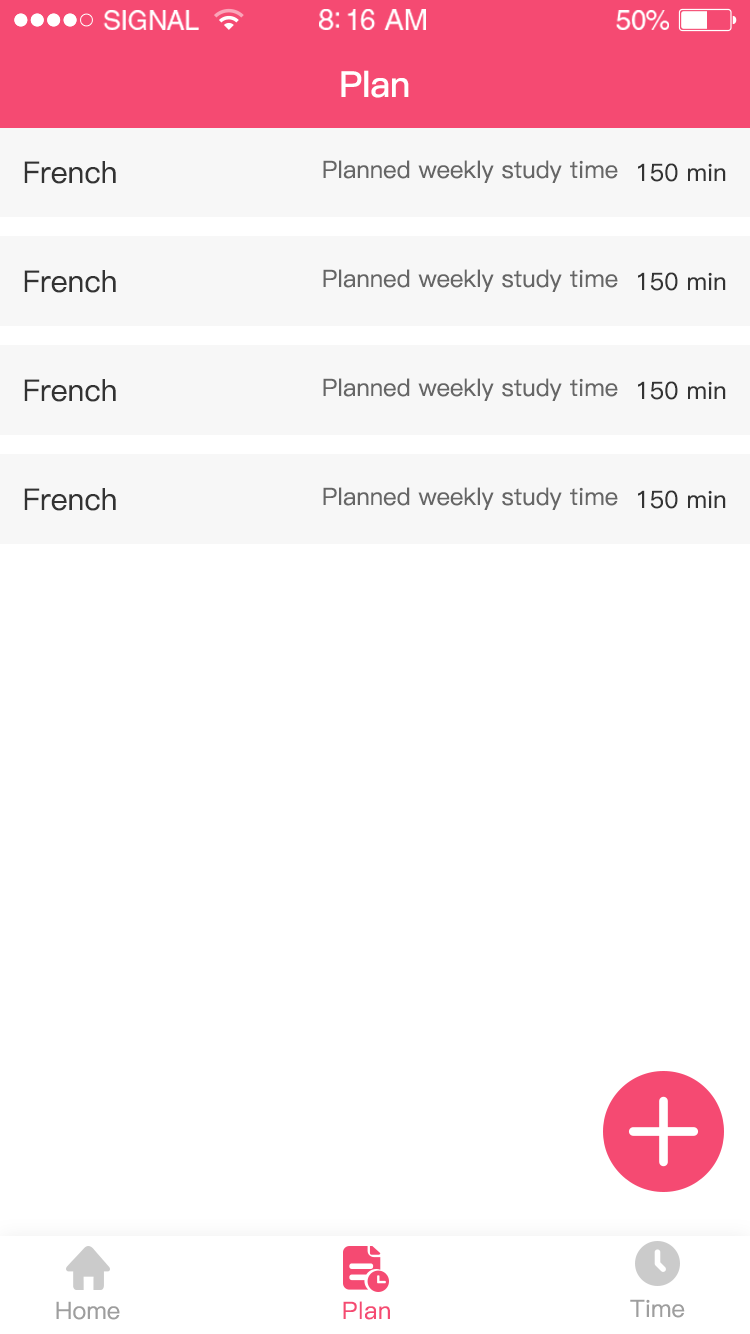
<style>
.page{position:relative;width:750px;height:1334px;background:#ffffff}
.page>*{position:absolute;margin:0}
.t1{font:26.9px "HelveticaLTStd-Roman";letter-spacing:-0.02em;color:#ffffff}
.t2{font:29.3px "HelveticaLTStd-Roman";letter-spacing:-0.02em;color:#ffffff}
.t3{font:28.1px "HelveticaLTStd-Roman";letter-spacing:-0.02em;color:#ffffff}
.t4{font:36px "PingFang-SC-Bold";letter-spacing:-0.02em;color:#ffffff}
.t5{font:30px "PingFang-SC-Medium";color:#333333}
.t6{font:24px "PingFang-SC-Medium";color:#666666}
.t7{font:24px "PingFang-SC-Medium";color:#333333}
.t8{font:24px "PingFang-SC-Medium";color:#9e9e9e}
.t9{font:24px "PingFang-SC-Medium";letter-spacing:0.02em;color:#f54a72}
</style>
<div class="page">
<p class="t1" style="left:103px;top:10px;width:96px;height:20px">SIGNAL</p>
<p class="t2" style="left:319px;top:9px;width:107px;height:21px">8:16 AM</p>
<p class="t3" style="left:616px;top:10px;width:53px;height:20px">50%</p>
<p class="t4" style="left:341px;top:70px;width:68px;height:28px">Plan</p>
<p class="t5" style="left:24px;top:161px;width:92px;height:23px">French</p>
<p class="t6" style="left:323px;top:160px;width:295px;height:23px">Planned weekly study time</p>
<p class="t7" style="left:638px;top:163px;width:88px;height:19px">150 min</p>
<p class="t5" style="left:24px;top:270px;width:92px;height:23px">French</p>
<p class="t6" style="left:323px;top:269px;width:295px;height:23px">Planned weekly study time</p>
<p class="t7" style="left:638px;top:272px;width:88px;height:19px">150 min</p>
<p class="t5" style="left:24px;top:379px;width:92px;height:23px">French</p>
<p class="t6" style="left:323px;top:378px;width:295px;height:23px">Planned weekly study time</p>
<p class="t7" style="left:638px;top:381px;width:88px;height:19px">150 min</p>
<p class="t5" style="left:24px;top:488px;width:92px;height:23px">French</p>
<p class="t6" style="left:323px;top:487px;width:295px;height:23px">Planned weekly study time</p>
<p class="t7" style="left:638px;top:490px;width:88px;height:19px">150 min</p>
<p class="t8" style="left:56px;top:1301px;width:64px;height:19px">Home</p>
<p class="t9" style="left:343px;top:1301px;width:47px;height:19px">Plan</p>
<p class="t8" style="left:630px;top:1299px;width:55px;height:19px">Time</p>
</div>
